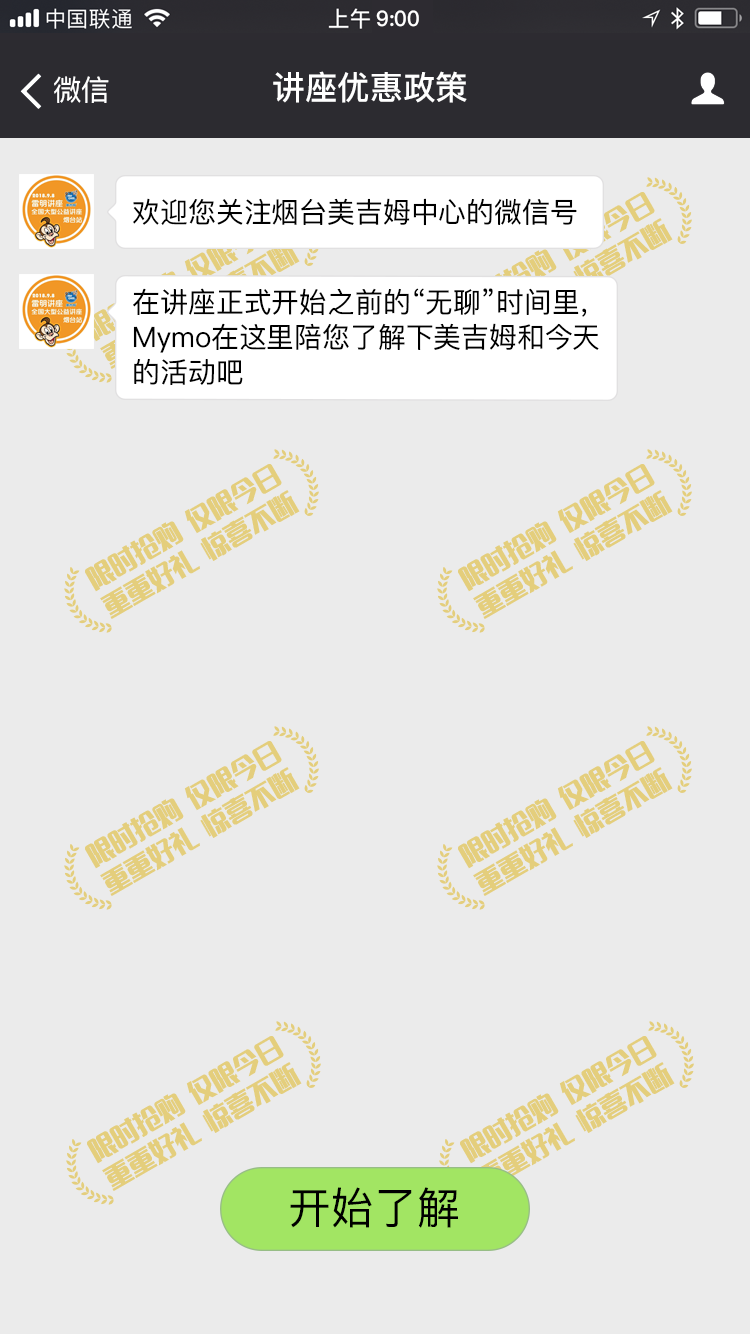
<style>
.page{position:relative;width:750px;height:1334px;background:#ebebeb}
.page>*{position:absolute;margin:0}
.t1{font:21.3px "PingFangSC-Medium";color:#ffffff}
.t2{font:28.8px "PingFangSC-Regular";color:#ffffff}
.t3{font:32.9px "PingFangSC-Medium";color:#ffffff}
.t4{font:28.1px "PingFangSC-Regular";color:#000000}
.t5{font:28.1px/40.8px "PingFangSC-Regular";color:#000000}
.t6{font:43.4px "PingFangSC-Regular";color:#000000}
</style>
<div class="page">
<p class="t1" style="left:376px;top:10px;width:43px;height:17px">9:00</p>
<p class="t2" style="left:54px;top:76px;width:55px;height:27px">微信</p>
<p class="t3" style="left:273px;top:71px;width:194px;height:32px">讲座优惠政策</p>
<p class="t4" style="left:133px;top:198px;width:444px;height:28px">欢迎您关注烟台美吉姆中心的微信号</p>
<p class="t5" style="left:133px;top:288px;width:466px;height:97px">在讲座正式开始之前的“无聊”时间里，<br>Mymo在这里陪您了解下美吉姆和今天<br>的活动吧</p>
<p class="t6" style="left:290px;top:1187px;width:168px;height:41px">开始了解</p>
</div>
